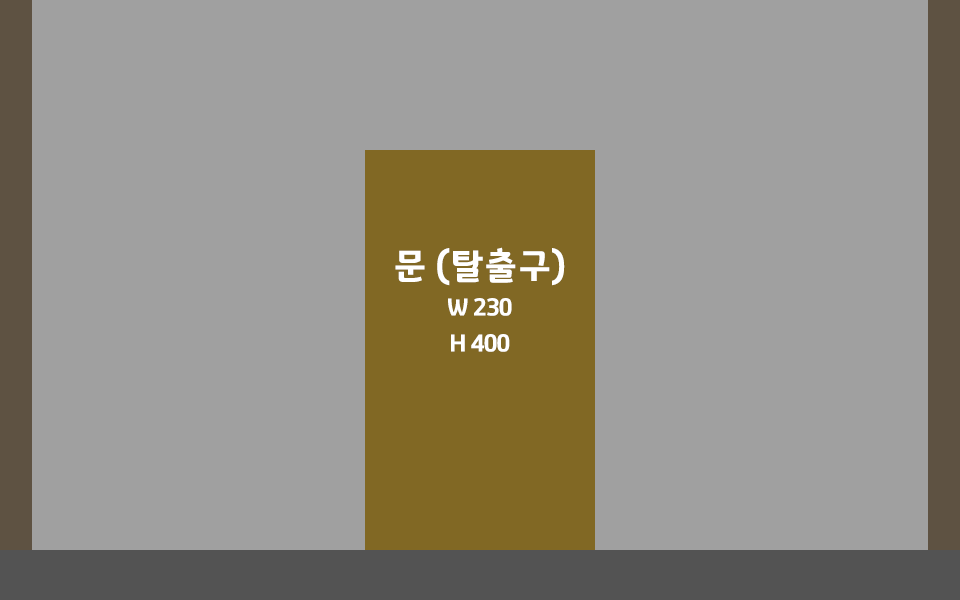
<style>
.page{position:relative;width:960px;height:600px;background:#a0a0a0}
.page>*{position:absolute;margin:0}
.t1{font:24px/36px "GyeonggiTitleV";letter-spacing:-0.05em;color:#ffffff}
.t2{font:36px/12px "GyeonggiTitleV";letter-spacing:-0.05em;color:#ffffff}
</style>
<div class="page">
<p class="t1" style="left:395px;top:247px;width:170px;height:105px;text-align:center"><span class="t2">문 (탈출구)<br><br><br><br></span>W 230<br>H 400</p>
</div>
